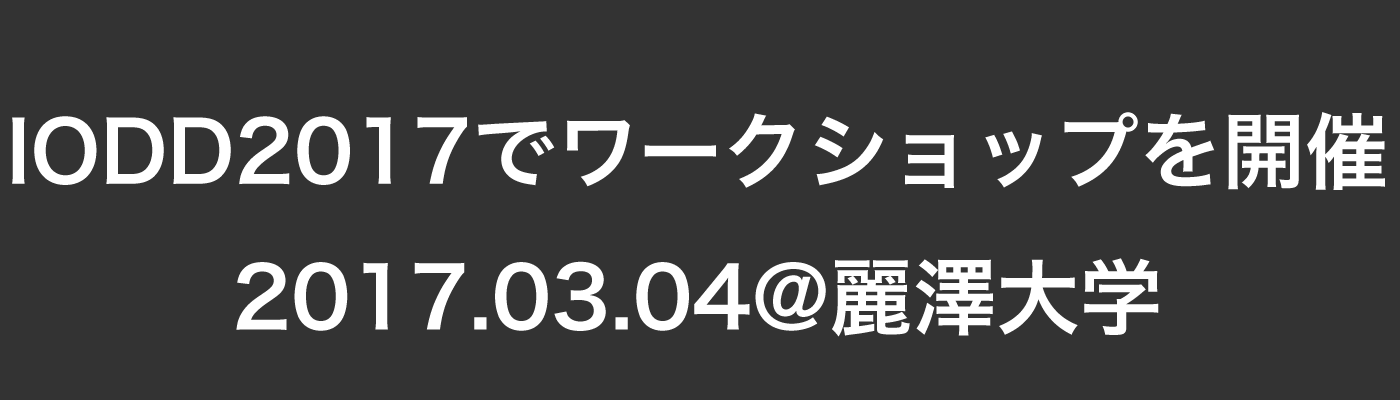
<style>
.page{position:relative;width:1400px;height:400px;background:#333333}
.page>*{position:absolute;margin:0}
.t1{font:83.3px "HiraKakuPro-W6";color:#ffffff}
</style>
<div class="page">
<p class="t1" style="left:12px;top:112px;width:1373px;height:225px;text-align:center">IODD2017でワークショップを開催<br>2017.03.04@麗澤大学</p>
</div>
